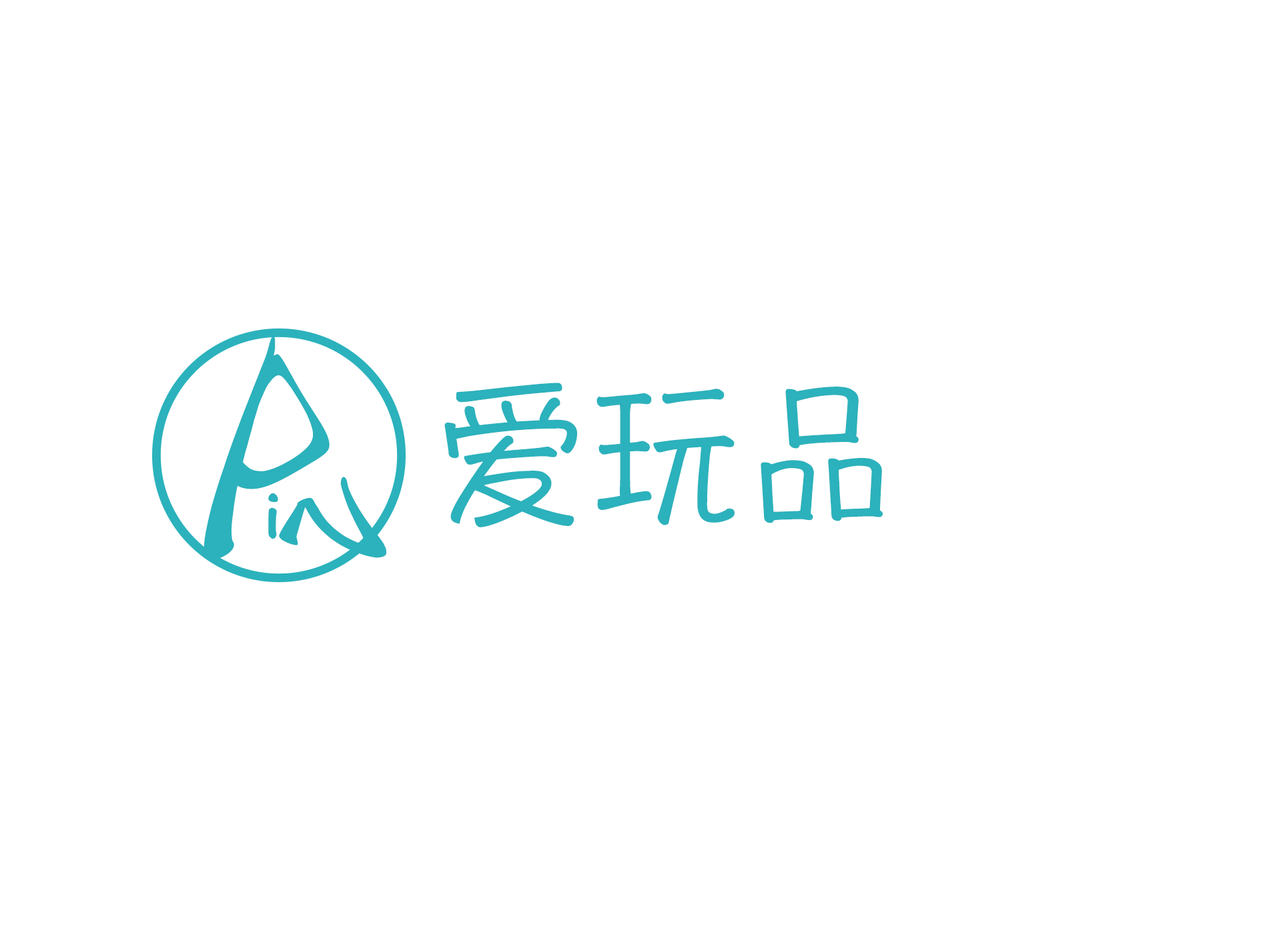
<style>
.page{position:relative;width:1261px;height:946px;background:#ffffff}
.page>*{position:absolute;margin:0}
.t1{font:239.1px "HannotateSC-W5";color:#2bb2bc}
.t2{font:155.7px "HannotateSC-W5";color:#2bb2bc}
.t3{font:100.1px "HannotateSC-W5";color:#2bb2bc}
.t4{font:55.6px "HannotateSC-W7";color:#2bb2bc}
</style>
<div class="page">
<p class="t1" style="left:204px;top:336px;width:126px;height:224px">P</p>
<p class="t2" style="left:444px;top:382px;width:439px;height:145px">爱玩品</p>
<p class="t3" style="left:279px;top:476px;width:107px;height:82px">N</p>
<p class="t4" style="left:268px;top:492px;width:10px;height:46px">i</p>
</div>
